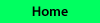
<style>
.page{position:relative;width:100px;height:23px;background:#00ff60}
.page>*{position:absolute;margin:0}
.t1{font:14px "MyriadPro-Semibold";color:#000000}
</style>
<div class="page">
<p class="t1" style="left:32px;top:6px;width:36px;height:10px">Home</p>
</div>
